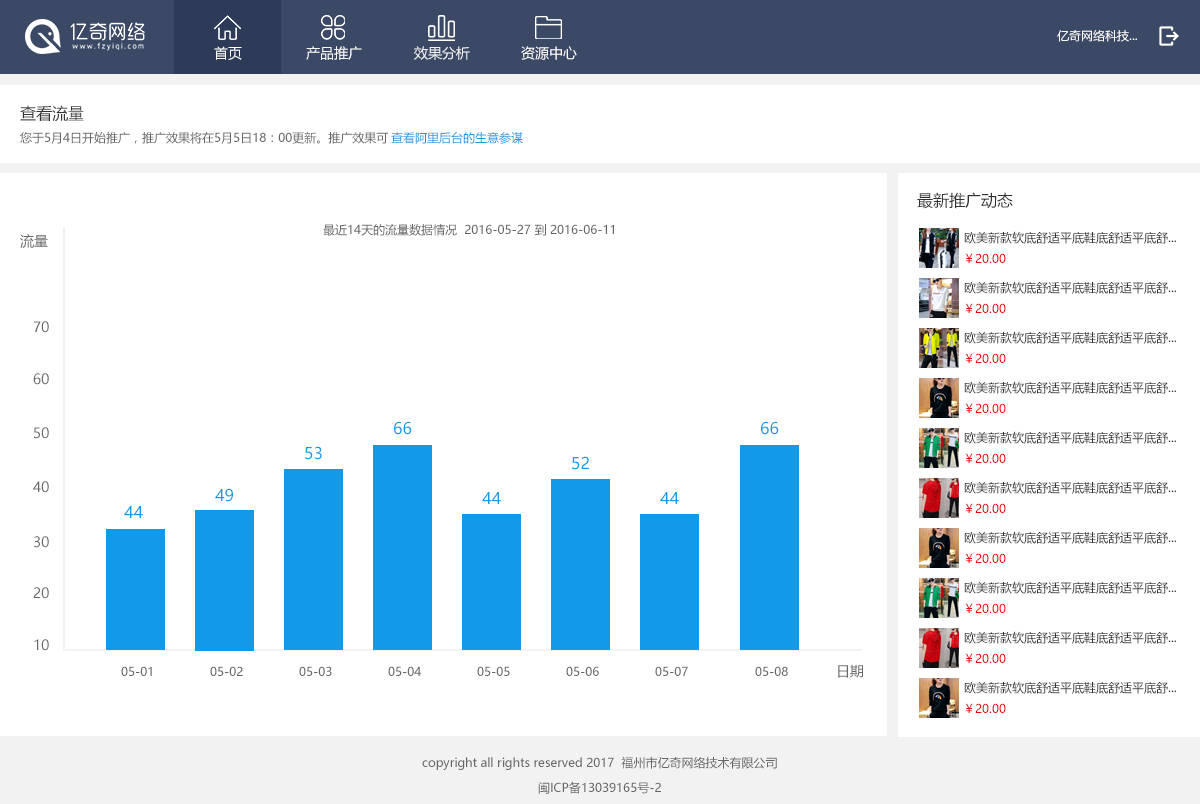
<style>
.page{position:relative;width:1200px;height:804px;background:#ffffff}
.page>*{position:absolute;margin:0}
.t1{font:12px "MicrosoftYaHei";color:#ffffff}
.t2{font:14px "MicrosoftYaHei";color:#ffffff}
.t3{font:14px "MicrosoftYaHei";color:#f2f2f2}
.t4{font:16px "MicrosoftYaHei";color:#333333}
.t5{font:12px "MicrosoftYaHei";color:#666666}
.t6{font:12px "MicrosoftYaHei";color:#1299e7}
.t7{font:12px "MicrosoftYaHei";color:#333333}
.t8{font:14px "MicrosoftYaHei";color:#666666}
.t9{font:12px "MicrosoftYaHei";color:#ec0606}
.t10{font:16px "MicrosoftYaHei";color:#1299e7}
</style>
<div class="page">
<p class="t1" style="left:1057px;top:30px;width:80px;height:12px">亿奇网络科技...</p>
<p class="t2" style="left:214px;top:46px;width:28px;height:14px">首页</p>
<p class="t2" style="left:306px;top:46px;width:56px;height:14px">产品推广</p>
<p class="t3" style="left:414px;top:46px;width:56px;height:14px">效果分析</p>
<p class="t2" style="left:521px;top:46px;width:56px;height:14px">资源中心</p>
<p class="t4" style="left:20px;top:105px;width:64px;height:17px">查看流量</p>
<p class="t5" style="left:20px;top:132px;width:368px;height:12px">您于5月4日开始推广，推广效果将在5月5日18：00更新。推广效果可</p>
<p class="t6" style="left:391px;top:131px;width:132px;height:13px">查看阿里后台的生意参谋</p>
<p class="t4" style="left:917px;top:192px;width:96px;height:17px">最新推广动态</p>
<p class="t5" style="left:323px;top:223px;width:291px;height:13px">最近14天的流量数据情况  2016-05-27 到 2016-06-11</p>
<p class="t7" style="left:964px;top:231px;width:212px;height:13px">欧美新款软底舒适平底鞋底舒适平底舒...</p>
<p class="t8" style="left:20px;top:234px;width:28px;height:14px">流量</p>
<p class="t9" style="left:965px;top:253px;width:41px;height:10px">￥20.00</p>
<p class="t7" style="left:964px;top:281px;width:212px;height:13px">欧美新款软底舒适平底鞋底舒适平底舒...</p>
<p class="t9" style="left:965px;top:303px;width:41px;height:10px">￥20.00</p>
<p class="t8" style="left:33px;top:321px;width:16px;height:12px">70</p>
<p class="t7" style="left:964px;top:331px;width:212px;height:13px">欧美新款软底舒适平底鞋底舒适平底舒...</p>
<p class="t9" style="left:965px;top:353px;width:41px;height:10px">￥20.00</p>
<p class="t8" style="left:33px;top:373px;width:16px;height:12px">60</p>
<p class="t7" style="left:964px;top:381px;width:212px;height:13px">欧美新款软底舒适平底鞋底舒适平底舒...</p>
<p class="t9" style="left:965px;top:403px;width:41px;height:10px">￥20.00</p>
<p class="t10" style="left:394px;top:421px;width:18px;height:14px">66</p>
<p class="t10" style="left:761px;top:421px;width:18px;height:14px">66</p>
<p class="t8" style="left:34px;top:427px;width:15px;height:12px">50</p>
<p class="t7" style="left:964px;top:431px;width:212px;height:13px">欧美新款软底舒适平底鞋底舒适平底舒...</p>
<p class="t10" style="left:305px;top:446px;width:17px;height:14px">53</p>
<p class="t10" style="left:572px;top:456px;width:17px;height:14px">52</p>
<p class="t9" style="left:965px;top:453px;width:41px;height:10px">￥20.00</p>
<p class="t8" style="left:33px;top:481px;width:16px;height:12px">40</p>
<p class="t7" style="left:964px;top:481px;width:212px;height:13px">欧美新款软底舒适平底鞋底舒适平底舒...</p>
<p class="t10" style="left:215px;top:488px;width:18px;height:14px">49</p>
<p class="t10" style="left:482px;top:492px;width:19px;height:12px">44</p>
<p class="t10" style="left:660px;top:492px;width:19px;height:12px">44</p>
<p class="t10" style="left:124px;top:506px;width:19px;height:12px">44</p>
<p class="t9" style="left:965px;top:503px;width:41px;height:10px">￥20.00</p>
<p class="t7" style="left:964px;top:531px;width:212px;height:13px">欧美新款软底舒适平底鞋底舒适平底舒...</p>
<p class="t8" style="left:34px;top:536px;width:15px;height:12px">30</p>
<p class="t9" style="left:965px;top:553px;width:41px;height:10px">￥20.00</p>
<p class="t7" style="left:964px;top:581px;width:212px;height:13px">欧美新款软底舒适平底鞋底舒适平底舒...</p>
<p class="t8" style="left:33px;top:587px;width:16px;height:12px">20</p>
<p class="t9" style="left:965px;top:603px;width:41px;height:10px">￥20.00</p>
<p class="t8" style="left:34px;top:639px;width:15px;height:12px">10</p>
<p class="t7" style="left:964px;top:631px;width:212px;height:13px">欧美新款软底舒适平底鞋底舒适平底舒...</p>
<p class="t9" style="left:965px;top:653px;width:41px;height:10px">￥20.00</p>
<p class="t8" style="left:838px;top:664px;width:25px;height:14px">日期</p>
<p class="t5" style="left:121px;top:666px;width:31px;height:10px">05-01</p>
<p class="t5" style="left:210px;top:666px;width:33px;height:10px">05-02</p>
<p class="t5" style="left:299px;top:666px;width:33px;height:10px">05-03</p>
<p class="t5" style="left:388px;top:666px;width:33px;height:10px">05-04</p>
<p class="t5" style="left:477px;top:666px;width:33px;height:10px">05-05</p>
<p class="t5" style="left:566px;top:666px;width:33px;height:10px">05-06</p>
<p class="t5" style="left:655px;top:666px;width:33px;height:10px">05-07</p>
<p class="t5" style="left:755px;top:666px;width:33px;height:10px">05-08</p>
<p class="t7" style="left:964px;top:681px;width:212px;height:13px">欧美新款软底舒适平底鞋底舒适平底舒...</p>
<p class="t9" style="left:965px;top:703px;width:41px;height:10px">￥20.00</p>
<p class="t5" style="left:422px;top:756px;width:355px;height:14px">copyright all rights reserved 2017  福州市亿奇网络技术有限公司</p>
<p class="t5" style="left:538px;top:781px;width:123px;height:13px">闽ICP备13039165号-2</p>
</div>
